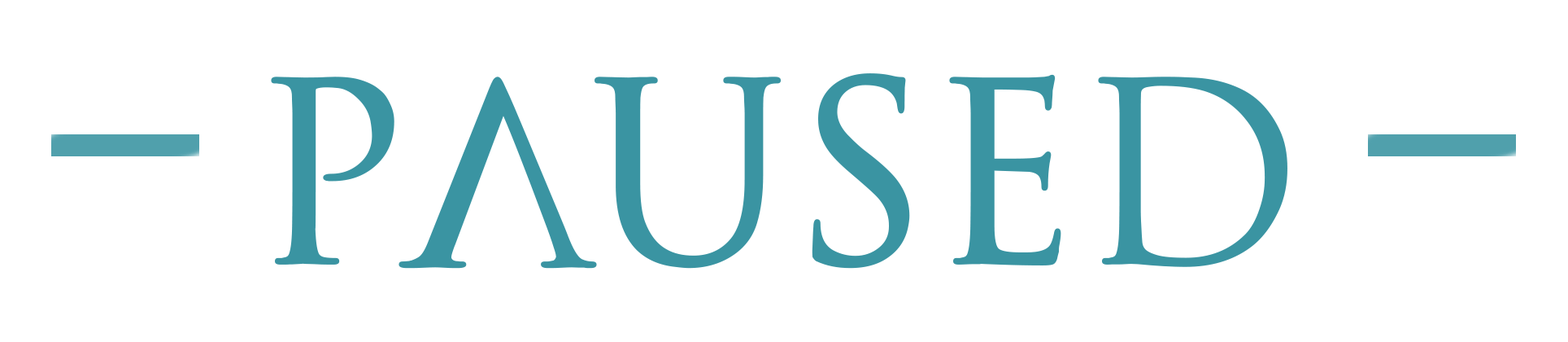
<style>
.page{position:relative;width:1568px;height:342px;background:#ffffff}
.page>*{position:absolute;margin:0}
.t1{font:244px "SpaceandAstronomy";color:#3a94a2}
</style>
<div class="page">
<p class="t1" style="left:271px;top:73px;width:1016px;height:195px">Paused</p>
</div>
